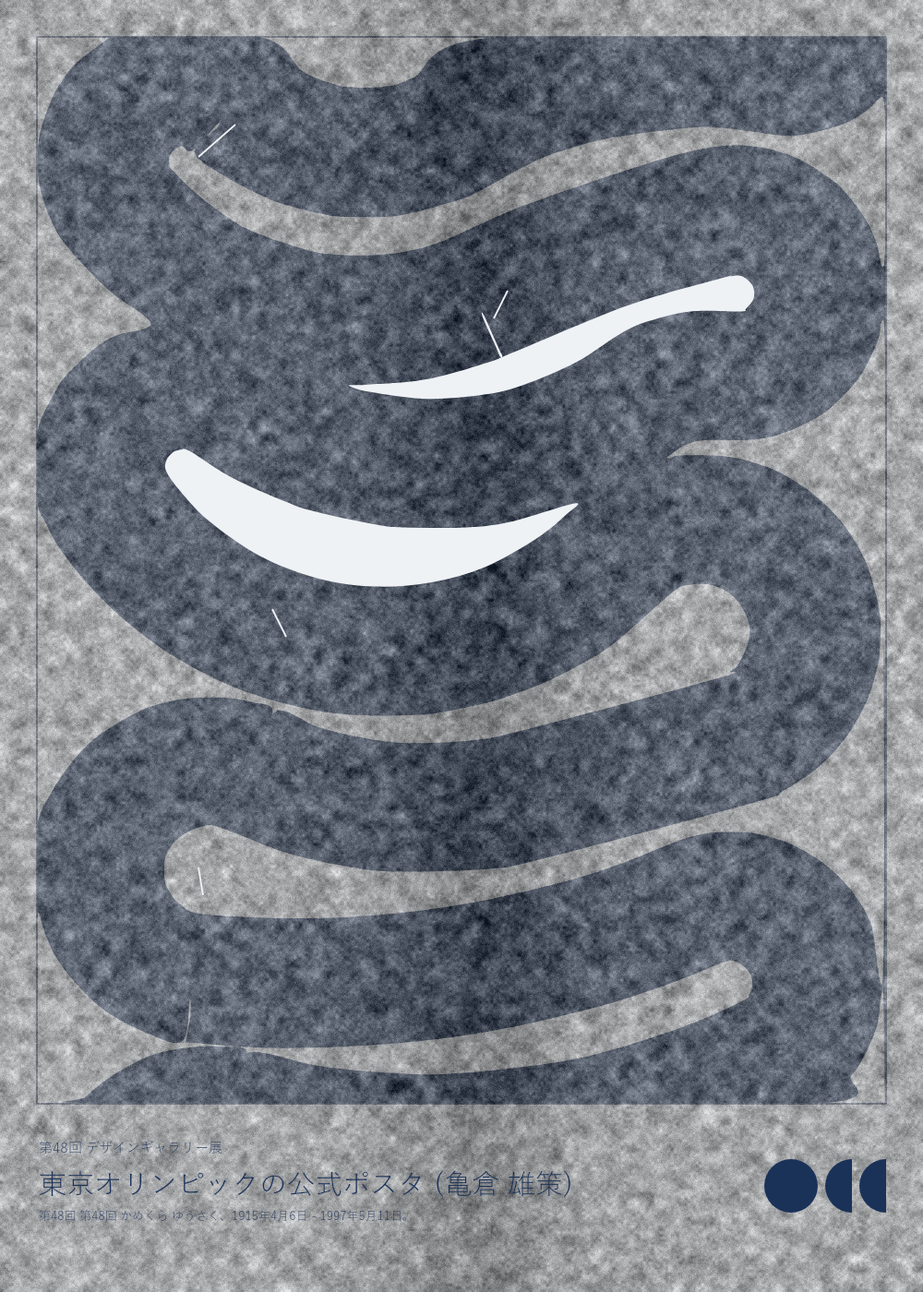
<style>
.page{position:relative;width:923px;height:1292px}
.page>*{position:absolute;margin:0}
.t1{font:13.8px "YuGothic-Medium";color:#1a3258}
.t2{font:27.7px "YuGothic-Bold";letter-spacing:0.017em;color:#1a3258}
.t3{font:12px "YuGothic-Regular"}
</style>
<div class="page">
<p class="t1" style="left:39px;top:1143px;width:184px;height:17px">第48回 デザインギャラリー展</p>
<p class="t2" style="left:39px;top:1174px;width:545px;height:35px">東京オリンピックの公式ポスタ (亀倉 雄策)</p>
<p class="t3" style="left:39px;top:1211px;width:393px;height:15px">第48回 第48回 かめくら ゆうさく、1915年4月6日 - 1997年5月11日。</p>
</div>
